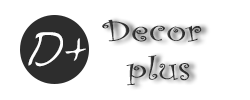
<style>
.page{position:relative;width:250px;height:100px;background:#ffffff}
.page>*{position:absolute;margin:0}
.t1{font:31.7px "CurlzMT";color:#2d2d2d;scale:1.35 1}
.t2{font:40px "Avantque...";color:#ffffff}
</style>
<div class="page">
<p class="t1" style="left:102px;top:19px;width:100px;height:67px;text-align:center">Decor<br> plus</p>
<p class="t2" style="left:28px;top:32px;width:58px;height:35px">D+</p>
</div>
